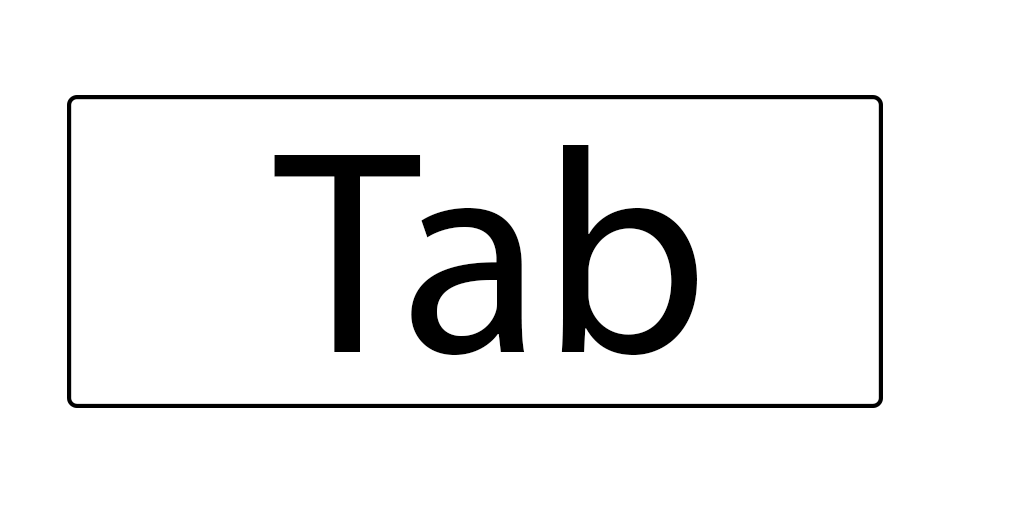
<style>
.page{position:relative;width:1024px;height:512px;background:#ffffff}
.page>*{position:absolute;margin:0}
.t1{font:291.7px "MyriadPro-Regular";color:#000000}
</style>
<div class="page">
<p class="t1" style="left:274px;top:145px;width:423px;height:211px">Tab</p>
</div>
